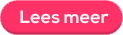
<style>
.page{position:relative;width:123px;height:35px;background:#ff3268}
.page>*{position:absolute;margin:0}
.t1{font:18px "NexaBold";color:#f4f3f5}
</style>
<div class="page">
<p class="t1" style="left:20px;top:10px;width:89px;height:14px">Lees meer</p>
</div>
